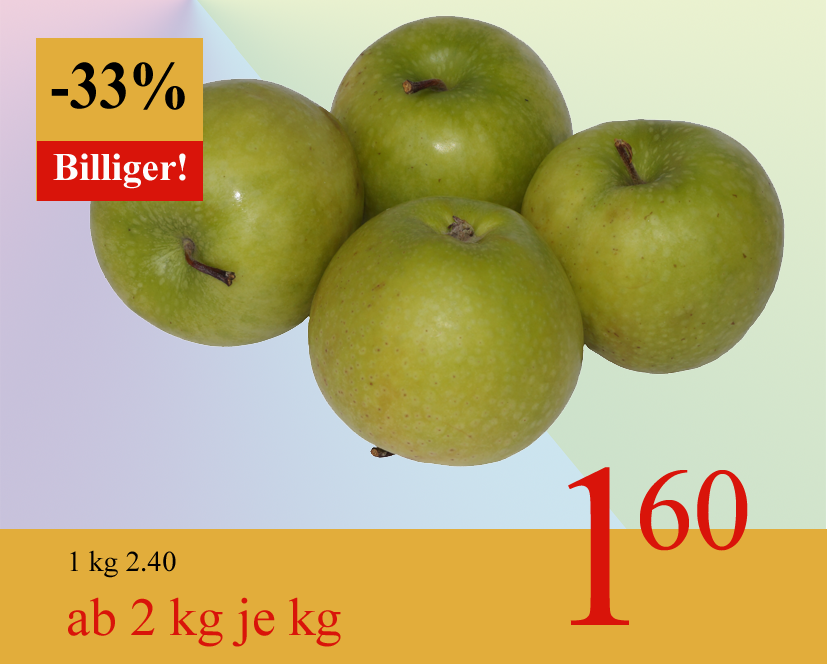
<style>
.page{position:relative;width:827px;height:664px;background:#e2ad3b}
.page>*{position:absolute;margin:0}
.t1{font:68.1px "TimesNewRomanPS-BoldMT";color:#000000;scale:0.87 1}
.t2{font:38.9px "TimesNewRomanPS-BoldMT";color:#fdfdfd}
.t3{font:233.3px "TimesNewRomanPSMT";color:#d9140a}
.t4{font:53.5px "TimesNewRomanPSMT";color:#d9140a}
.t5{font:116.7px "TimesNewRomanPSMT";color:#d9140a}
.t6{font:29.2px "TimesNewRomanPSMT";color:#010000}
</style>
<div class="page">
<p class="t1" style="left:51px;top:62px;width:134px;height:48px">-33%</p>
<p class="t2" style="left:53px;top:153px;width:133px;height:36px">Billiger!</p>
<p class="t3" style="left:568px;top:467px;width:61px;height:158px"><span class="t4">              </span>1</p>
<p class="t5" style="left:640px;top:470px;width:108px;height:81px">60</p>
<p class="t6" style="left:70px;top:550px;width:106px;height:28px">1 kg 2.40</p>
<p class="t4" style="left:68px;top:597px;width:273px;height:50px">ab 2 kg je kg</p>
</div>
